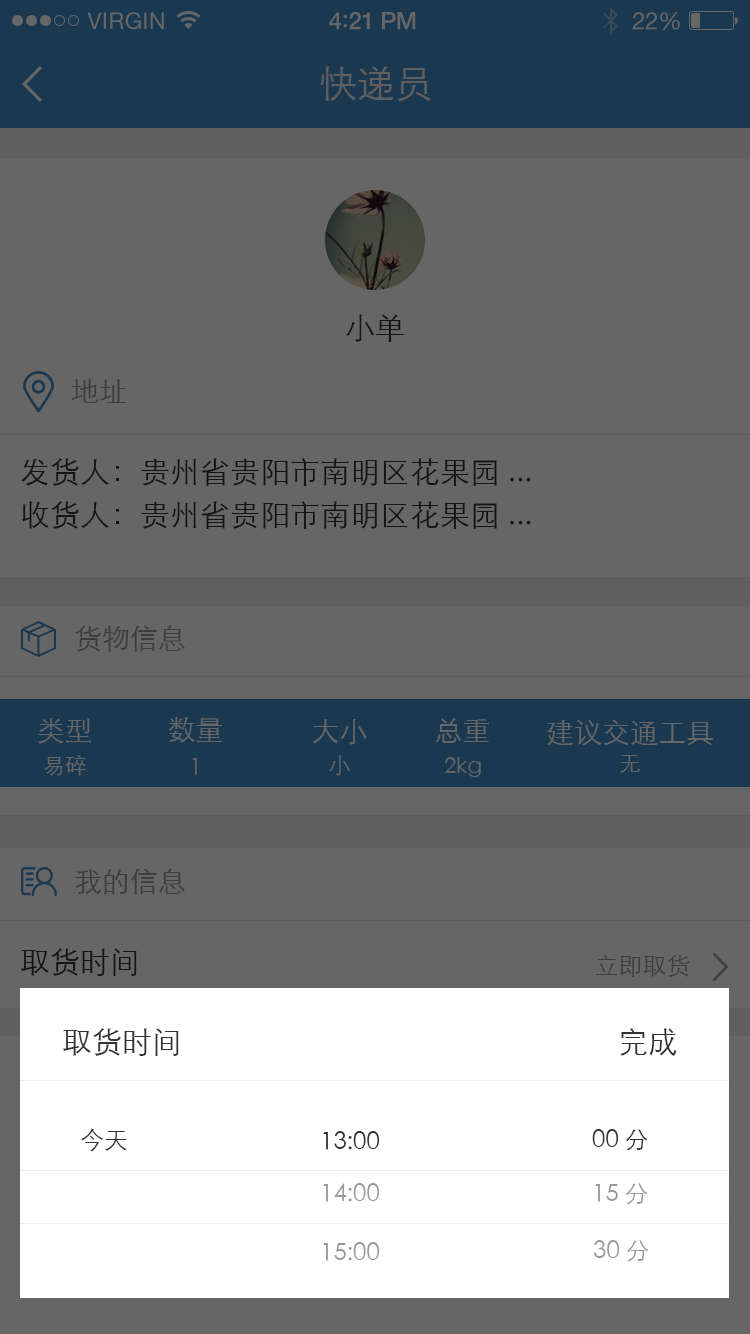
<style>
.page{position:relative;width:750px;height:1334px;background:#666666}
.page>*{position:absolute;margin:0}
.t1{font:23px "HelveticaNeue";letter-spacing:0.02em;color:#666666}
.t2{font:24px "HelveticaNeue-Medium";letter-spacing:-0.02em;color:#666666}
.t3{font:26px "Avenir-Medium";letter-spacing:-0.02em;color:#666666}
.t4{font:24px "HelveticaNeue";letter-spacing:-0.02em;color:#666666}
.t5{font:38px "STXihei";color:#5f5f5f}
.t6{font:30px "STXihei";color:#141414}
.t7{font:28px "STXihei";color:#3d3d3d}
.t8{font:28px "STXihei";color:#666666}
.t9{font:22px "STXihei";color:#666666}
.t10{font:24px "STXihei";color:#3d3d3d}
.t11{font:30px "STXihei";color:#333333}
.t12{font:24px "STXihei";color:#333333}
.t13{font:24px "STXihei";color:#999999}
</style>
<div class="page">
<p class="t1" style="left:87px;top:12px;width:77px;height:18px">VIRGIN</p>
<p class="t2" style="left:329px;top:12px;width:87px;height:18px">4<span class="t3">:</span>21 PM</p>
<p class="t4" style="left:632px;top:12px;width:48px;height:18px">22%</p>
<p class="t5" style="left:320px;top:66px;width:111px;height:36px">快递员</p>
<p class="t6" style="left:346px;top:314px;width:58px;height:28px">小单</p>
<p class="t7" style="left:71px;top:378px;width:55px;height:25px">地址</p>
<p class="t6" style="left:21px;top:458px;width:510px;height:28px">发货人：贵州省贵阳市南明区花果园...</p>
<p class="t6" style="left:22px;top:501px;width:509px;height:28px">收货人：贵州省贵阳市南明区花果园...</p>
<p class="t7" style="left:75px;top:625px;width:110px;height:27px">货物信息</p>
<p class="t8" style="left:38px;top:718px;width:53px;height:26px">类型</p>
<p class="t8" style="left:169px;top:717px;width:53px;height:26px">数量</p>
<p class="t8" style="left:312px;top:718px;width:55px;height:27px">大小</p>
<p class="t8" style="left:436px;top:718px;width:53px;height:25px">总重</p>
<p class="t8" style="left:547px;top:719px;width:166px;height:27px">建议交通工具</p>
<p class="t9" style="left:44px;top:755px;width:42px;height:21px">易碎</p>
<p class="t9" style="left:192px;top:758px;width:5px;height:17px">1</p>
<p class="t9" style="left:329px;top:755px;width:21px;height:21px">小</p>
<p class="t9" style="left:444px;top:756px;width:37px;height:21px">2kg</p>
<p class="t9" style="left:620px;top:755px;width:20px;height:18px">无</p>
<p class="t7" style="left:75px;top:868px;width:110px;height:27px">我的信息</p>
<p class="t6" style="left:21px;top:948px;width:116px;height:28px">取货时间</p>
<p class="t10" style="left:596px;top:954px;width:94px;height:23px">立即取货</p>
<p class="t11" style="left:63px;top:1028px;width:116px;height:28px">取货时间</p>
<p class="t11" style="left:620px;top:1028px;width:57px;height:28px">完成</p>
<p class="t12" style="left:81px;top:1128px;width:46px;height:24px">今天</p>
<p class="t12" style="left:323px;top:1131px;width:57px;height:19px">13:00</p>
<p class="t12" style="left:592px;top:1129px;width:56px;height:22px">00分</p>
<p class="t13" style="left:323px;top:1183px;width:57px;height:19px">14:00</p>
<p class="t13" style="left:595px;top:1183px;width:53px;height:22px">15分</p>
<p class="t13" style="left:593px;top:1240px;width:56px;height:22px">30分</p>
<p class="t13" style="left:323px;top:1242px;width:57px;height:19px">15:00</p>
</div>
